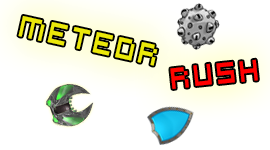
<style>
.page{position:relative;width:270px;height:150px;background:#ffffff}
.page>*{position:absolute;margin:0}
.t1{font:33px "VirtualDJ";color:#ebe80a;scale:0.8 1}
.t2{font:33px "VirtualDJ";color:#ff0000;scale:0.8 1}
</style>
<div class="page">
<p class="t1" style="left:18px;top:16px;width:140px;height:50px;rotate:13deg">METEOR</p>
<p class="t2" style="left:170px;top:59px;width:88px;height:30px;rotate:-6deg">RUSH</p>
</div>
